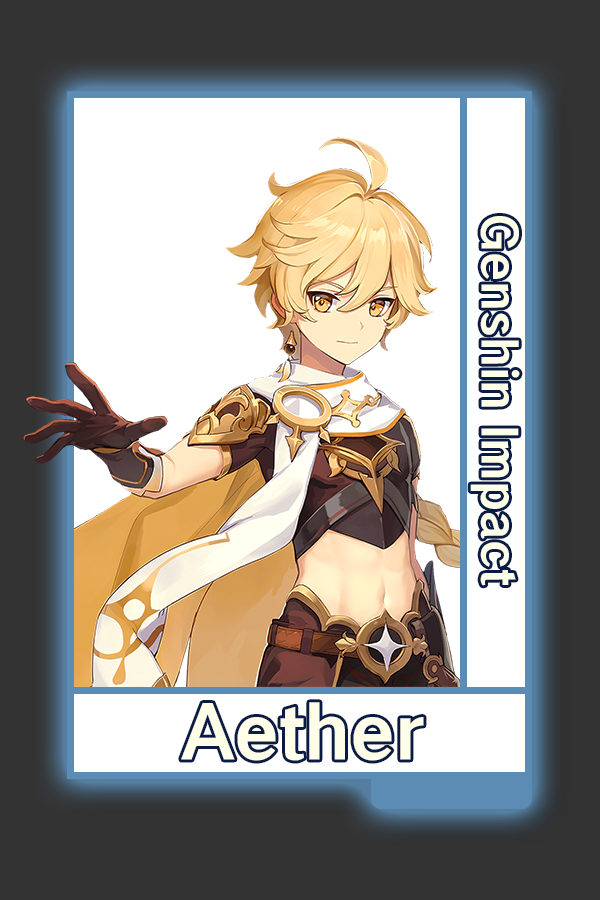
<style>
.page{position:relative;width:600px;height:900px;background:#ffffff}
.page>*{position:absolute;margin:0}
.t1{font:48.8px "HYWenHei-HEW";color:#fefef4}
.t2{font:75px "HYWenHei-HEW";color:#fefef4}
</style>
<div class="page">
<p class="t1" style="left:470px;top:216px;width:50px;height:370px;rotate:90deg">Genshin Impact</p>
<p class="t2" style="left:181px;top:702px;width:243px;height:59px">Aether</p>
</div>
